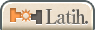
<style>
.page{position:relative;width:95px;height:30px}
.page>*{position:absolute;margin:0}
.t1{font:20px "RyuminPro-ExBold";letter-spacing:-0.08em;color:#696660;scale:0.9 1}
</style>
<div class="page">
<p class="t1" style="left:45px;top:9px;width:43px;height:15px">Latih.</p>
</div>
